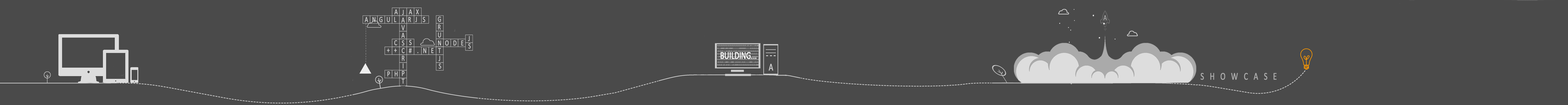
<style>
.page{position:relative;width:1568px;height:105px;background:#4a4a4a}
.page>*{position:absolute;margin:0}
.t1{font:2.3px/2.7px "Calibri";letter-spacing:-0.03em;color:#cccccc;font-weight:bold;scale:0.79 1}
.t2{font:10.3px "Calibri";letter-spacing:-0.03em;color:#ffffff;font-weight:bold;scale:0.75 1}
.t3{font:10.3px "Calibri";letter-spacing:-0.03em;color:#cccccc;font-weight:bold;scale:0.75 1}
.t4{font:10.3px "Calibri";letter-spacing:0.71em;color:#aaaaaa;font-weight:bold;scale:0.75 1}
</style>
<div class="page">
<p class="t1" style="left:717px;top:45px;width:42px;height:20px">010101010101010101010101010101011011011110100011100001000100001111111000000011111010101010101010111101001011010110101010101010101010101010101010101010101010101111000001101010101011110000011110100101010110101010111011110000001010101010101010101010110101010101101010101010101010111000111000110101011010111110001110101010101101101011110100001010101010101010101000</p>
<p class="t2" style="left:720px;top:52px;width:36px;height:7px">BUILDING...</p>
<p class="t3" style="left:769px;top:63px;width:4px;height:7px">A</p>
<p class="t4" style="left:1201px;top:73px;width:76px;height:7px">SHOWCASE</p>
</div>
